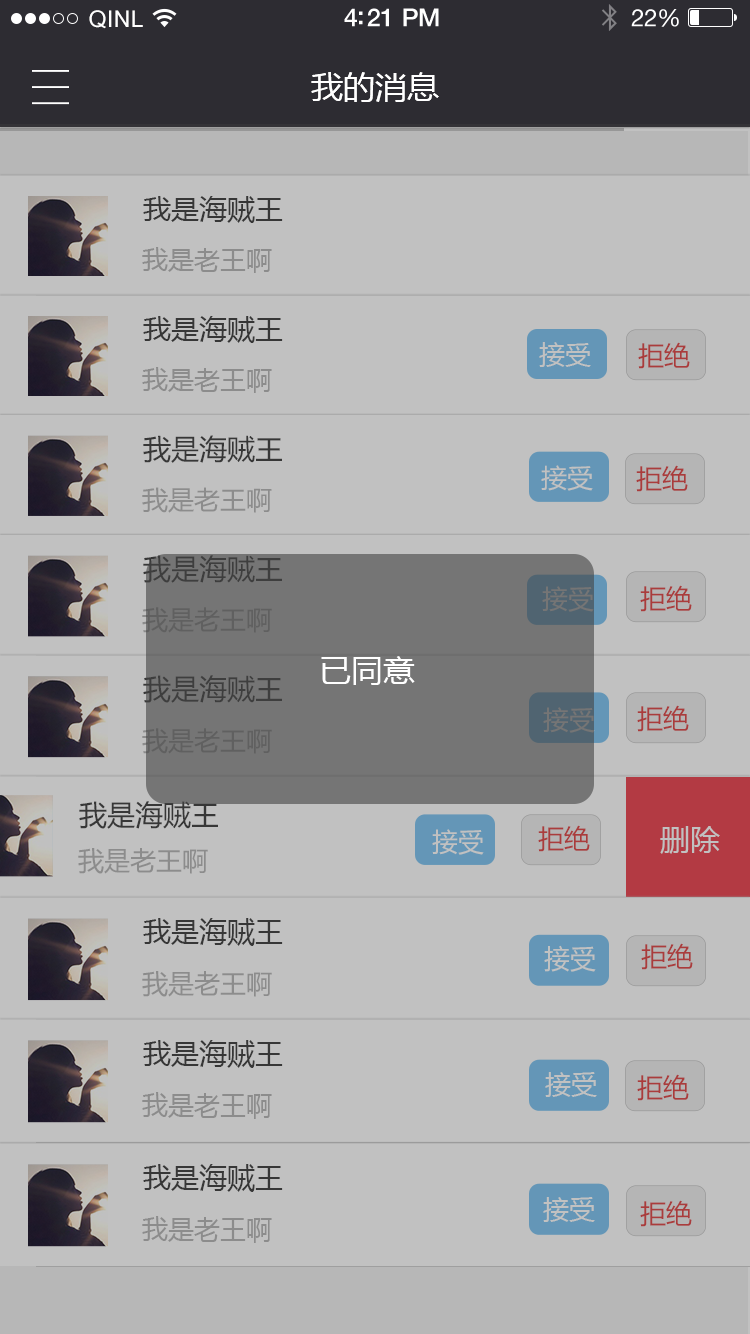
<style>
.page{position:relative;width:750px;height:1334px;background:#c1c1c1}
.page>*{position:absolute;margin:0}
.t1{font:23px "ArialUnicodeMS";letter-spacing:0.02em;color:#ffffff}
.t2{font:25px "HelveticaNeue-Medium";letter-spacing:-0.02em;color:#ffffff}
.t3{font:24px "HelveticaNeue";letter-spacing:-0.02em;color:#ffffff}
.t4{font:32px "MicrosoftYaHei";color:#ffffff}
.t5{font:28px "MicrosoftYaHei";color:#323232}
.t6{font:26px "MicrosoftYaHei";color:#8c8c8c}
.t7{font:26px "MicrosoftYaHei";color:#c1c1c1}
.t8{font:28.1px "MicrosoftYaHei";color:#323232}
.t9{font:26.1px "MicrosoftYaHei";color:#c1c1c1}
.t10{font:26.4px "MicrosoftYaHei";color:#aa3c3c}
.t11{font:26.1px "MicrosoftYaHei";color:#8c8c8c}
.t12{font:28.2px "MicrosoftYaHei";color:#323232}
.t13{font:26.3px "MicrosoftYaHei";color:#757575}
.t14{font:26.2px "MicrosoftYaHei";color:#606060}
.t15{font:28.3px "MicrosoftYaHei";color:#323232}
.t16{font:26.3px "MicrosoftYaHei";color:#606060}
.t17{font:28.4px "MicrosoftYaHei";color:#323232}
.t18{font:26.3px "MicrosoftYaHei";color:#c1c1c1}
.t19{font:26.4px "MicrosoftYaHei";color:#8c8c8c}
.t20{font:28.5px "MicrosoftYaHei";color:#323232}
.t21{font:26.5px "MicrosoftYaHei";color:#c1c1c1}
.t22{font:26.5px "MicrosoftYaHei";color:#8c8c8c}
.t23{font:28.6px "MicrosoftYaHei";color:#323232}
.t24{font:26.6px "MicrosoftYaHei";color:#c1c1c1}
.t25{font:26.6px "MicrosoftYaHei";color:#8c8c8c}
</style>
<div class="page">
<p class="t1" style="left:89px;top:10px;width:54px;height:19px">QINL</p>
<p class="t2" style="left:344px;top:8px;width:95px;height:19px">4:21 PM</p>
<p class="t3" style="left:631px;top:9px;width:48px;height:18px">22%</p>
<p class="t4" style="left:311px;top:72px;width:128px;height:30px">我的消息</p>
<p class="t5" style="left:143px;top:196px;width:140px;height:27px">我是海贼王</p>
<p class="t6" style="left:142px;top:247px;width:130px;height:26px">我是老王啊</p>
<p class="t5" style="left:143px;top:316px;width:140px;height:27px">我是海贼王</p>
<p class="t7" style="left:539px;top:342px;width:52px;height:25px">接受</p>
<p class="t6" style="left:142px;top:367px;width:130px;height:26px">我是老王啊</p>
<p class="t8" style="left:143px;top:435px;width:139px;height:28px">我是海贼王</p>
<p class="t9" style="left:541px;top:465px;width:52px;height:26px">接受</p>
<p class="t10" style="left:636px;top:465px;width:52px;height:27px">拒绝</p>
<p class="t11" style="left:142px;top:487px;width:130px;height:26px">我是老王啊</p>
<p class="t12" style="left:143px;top:555px;width:139px;height:28px">我是海贼王</p>
<p class="t13" style="left:542px;top:586px;width:52px;height:26px">接受</p>
<p class="t10" style="left:640px;top:585px;width:52px;height:27px">拒绝</p>
<p class="t14" style="left:142px;top:607px;width:130px;height:26px">我是老王啊</p>
<p class="t4" style="left:321px;top:656px;width:94px;height:29px">已同意</p>
<p class="t15" style="left:143px;top:675px;width:139px;height:28px">我是海贼王</p>
<p class="t10" style="left:637px;top:705px;width:52px;height:27px">拒绝</p>
<p class="t16" style="left:142px;top:728px;width:130px;height:26px">我是老王啊</p>
<p class="t17" style="left:79px;top:801px;width:139px;height:28px">我是海贼王</p>
<p class="t18" style="left:432px;top:829px;width:52px;height:26px">接受</p>
<p class="t10" style="left:538px;top:825px;width:52px;height:27px">拒绝</p>
<p class="t19" style="left:78px;top:848px;width:130px;height:26px">我是老王啊</p>
<p class="t20" style="left:143px;top:918px;width:140px;height:28px">我是海贼王</p>
<p class="t21" style="left:544px;top:945px;width:52px;height:27px">接受</p>
<p class="t10" style="left:641px;top:943px;width:52px;height:27px">拒绝</p>
<p class="t22" style="left:142px;top:971px;width:130px;height:26px">我是老王啊</p>
<p class="t23" style="left:143px;top:1040px;width:140px;height:28px">我是海贼王</p>
<p class="t24" style="left:545px;top:1072px;width:52px;height:25px">接受</p>
<p class="t10" style="left:637px;top:1074px;width:52px;height:27px">拒绝</p>
<p class="t25" style="left:142px;top:1092px;width:130px;height:27px">我是老王啊</p>
<p class="t23" style="left:143px;top:1164px;width:140px;height:28px">我是海贼王</p>
<p class="t24" style="left:543px;top:1197px;width:52px;height:25px">接受</p>
<p class="t10" style="left:640px;top:1200px;width:52px;height:27px">拒绝</p>
<p class="t25" style="left:142px;top:1216px;width:130px;height:27px">我是老王啊</p>
</div>
